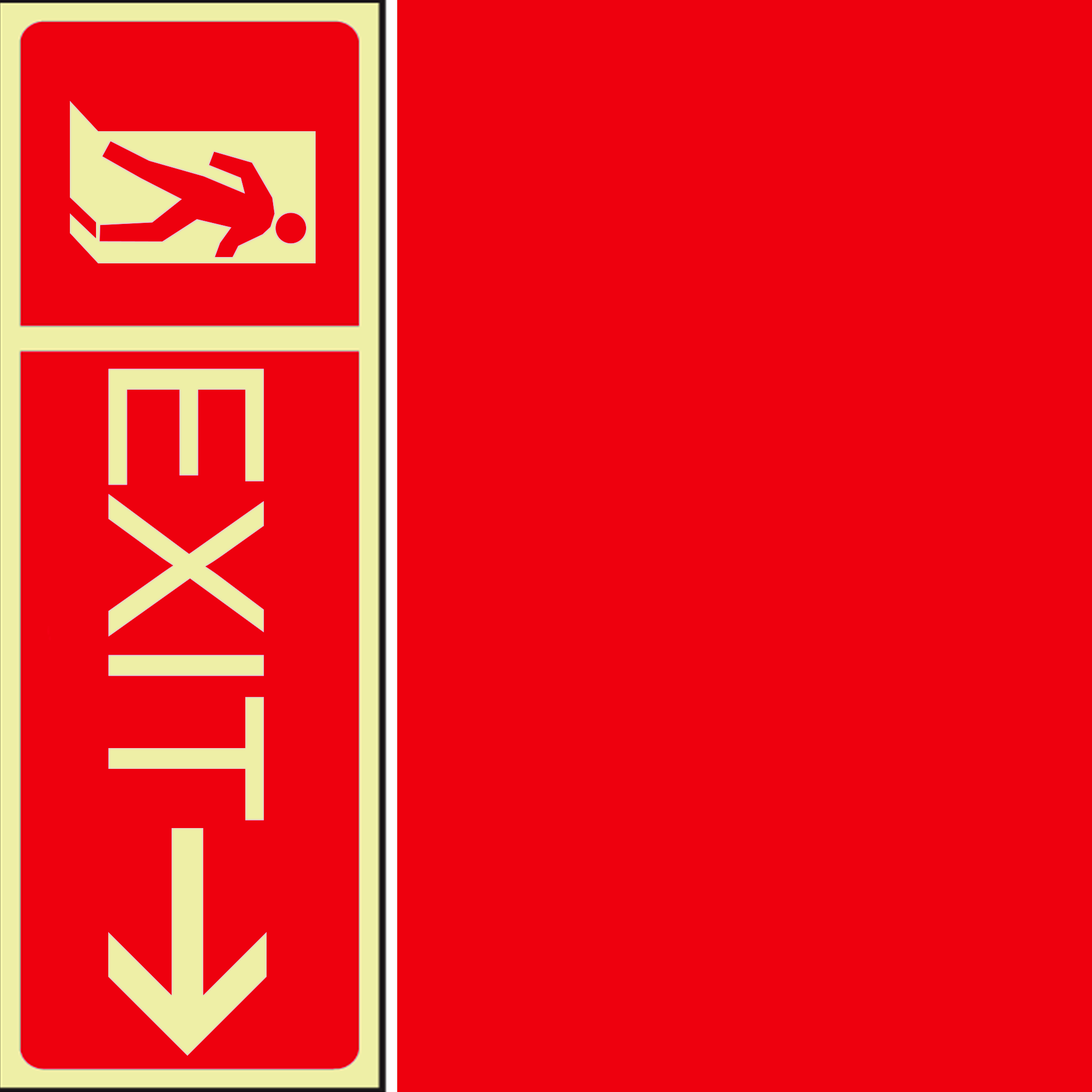
<style>
.page{position:relative;width:1092px;height:1092px;background:#ee000e}
.page>*{position:absolute;margin:0}
.t1{font:216.4px "ArialMT";letter-spacing:-0.04em;color:#eeefa6;font-weight:bold}
</style>
<div class="page">
<p class="t1" style="left:108px;top:368px;width:156px;height:453px;rotate:90deg">EXIT</p>
</div>
